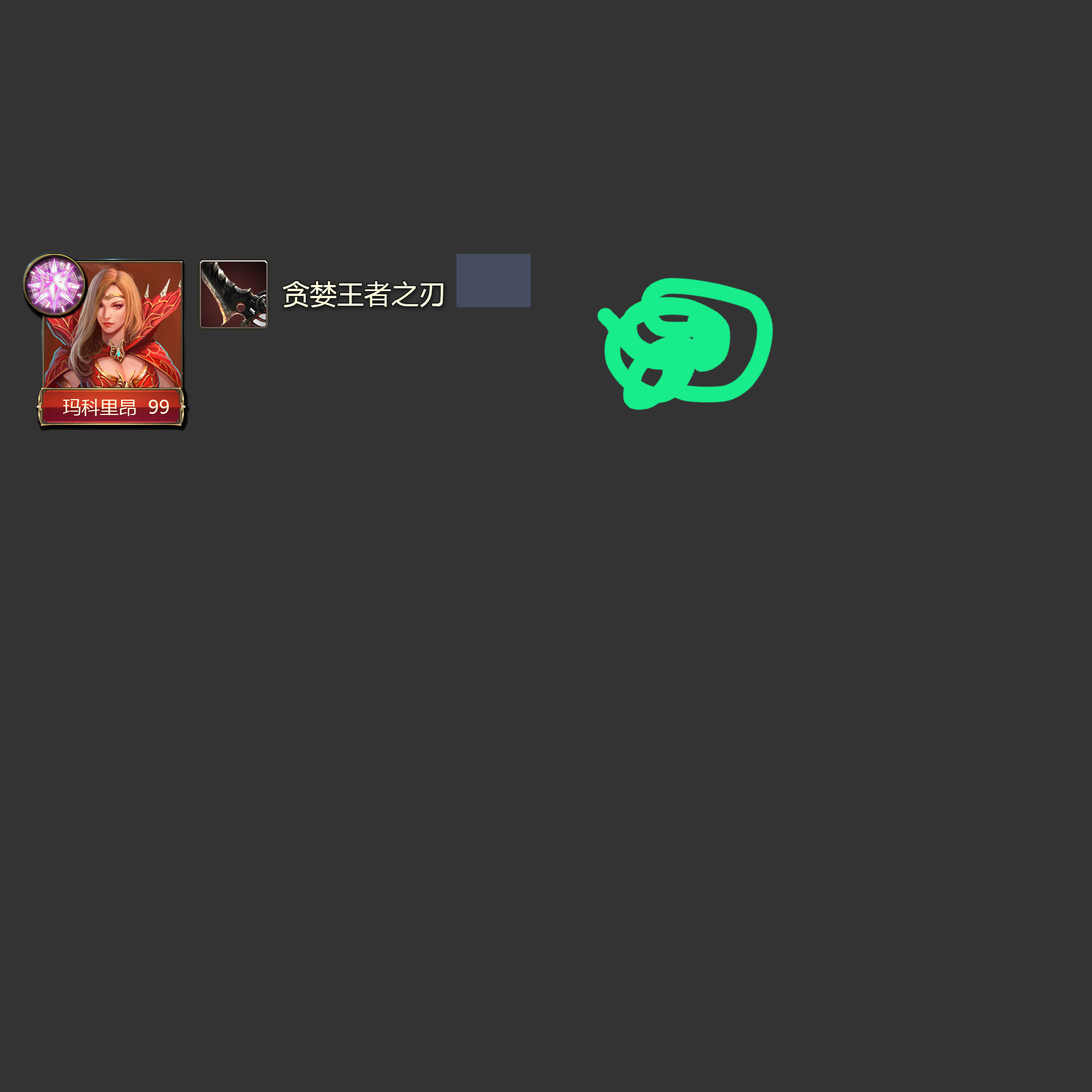
<style>
.page{position:relative;width:1092px;height:1092px;background:#333333}
.page>*{position:absolute;margin:0}
.t1{font:27.3px "MicrosoftYaHei";color:#fffddf}
.t2{font:18.6px "MicrosoftYaHei";color:#fffddf}
</style>
<div class="page">
<p class="t1" style="left:282px;top:281px;width:161px;height:26px">贪婪王者之刃</p>
<p class="t2" style="left:63px;top:399px;width:106px;height:17px">玛科里昂  99</p>
</div>
